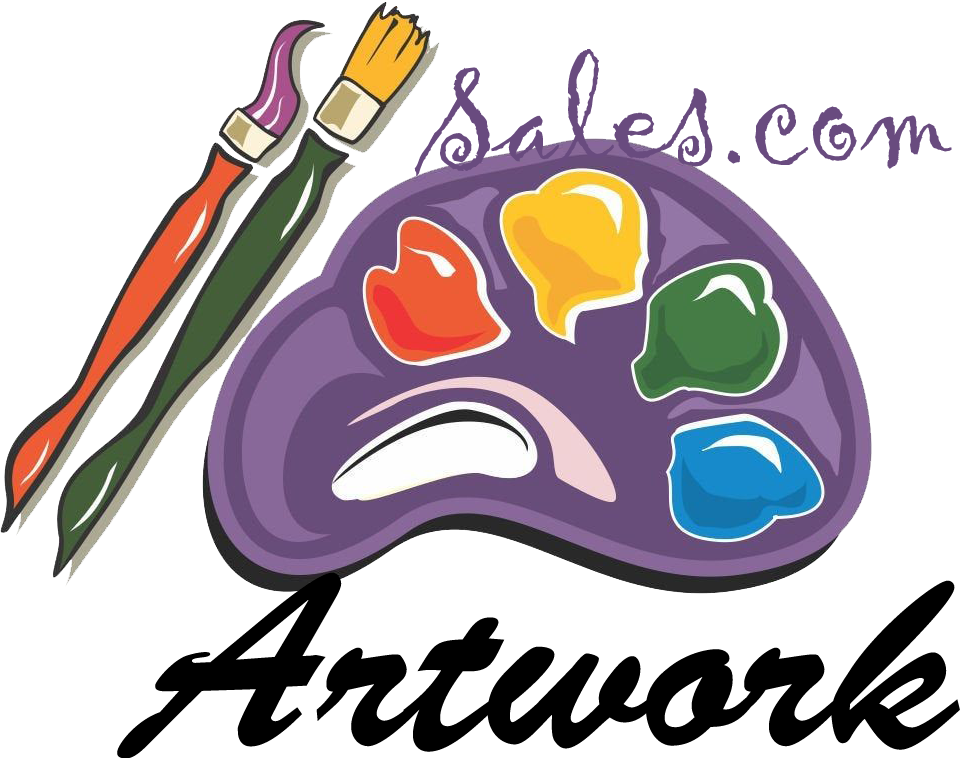
<style>
.page{position:relative;width:960px;height:758px;background:#ffffff}
.page>*{position:absolute;margin:0}
.t1{font:140px "Gigi-Regular";color:#694b7f}
.t2{font:250px "BrushScriptStd";color:#000000}
</style>
<div class="page">
<p class="t1" style="left:414px;top:49px;width:538px;height:128px">Sales.com</p>
<p class="t2" style="left:117px;top:572px;width:843px;height:187px">Artwork</p>
</div>
